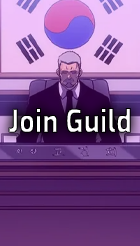
<style>
.page{position:relative;width:140px;height:246px}
.page>*{position:absolute;margin:0}
.t1{font:32px "ExoRoman-ExtraBold";scale:0.85 1}
</style>
<div class="page">
<p class="t1" style="left:8px;top:108px;width:123px;height:25px">Join Guild</p>
</div>
